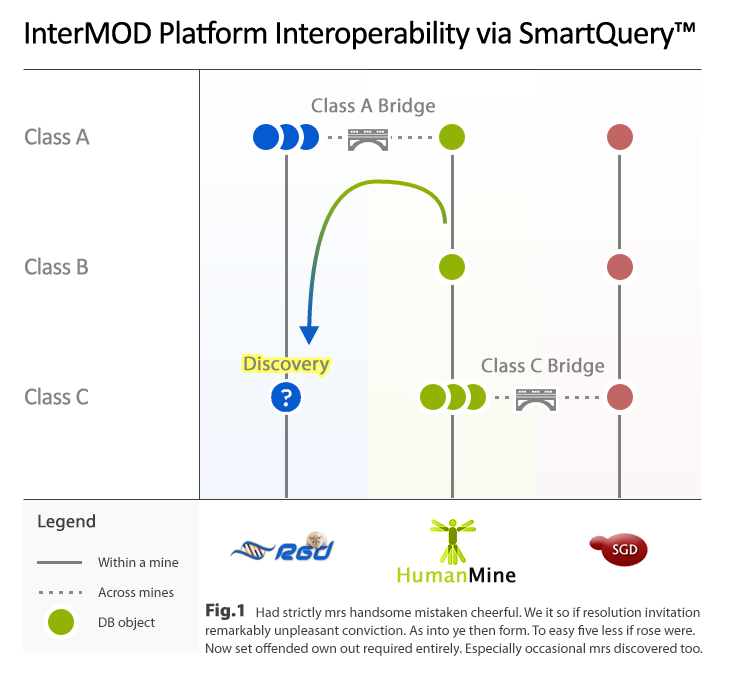
<style>
.page{position:relative;width:746px;height:685px;background:#ffffff}
.page>*{position:absolute;margin:0}
.t1{font:33.2px "Calibri";letter-spacing:-0.025em;color:#000000}
.t2{font:20px "MyriadPro-Regular";color:#828282;font-weight:bold}
.t3{font:24.5px "Calibri";letter-spacing:-0.025em;color:#848484}
.t4{font:18px "MyriadPro-Regular";color:#3e4043;font-weight:bold}
.t5{font:14px "MyriadPro-Regular";color:#3e4043}
.t6{font:20px "LucidaGrande";color:#b4d11f;font-weight:bold}
.t7{font:20px "LucidaGrande";color:#100c0c;font-weight:bold}
.t8{font:18px "MyriadPro-Bold";color:#3e4043;font-weight:bold}
.t9{font:14px/18px "MyriadPro-Regular";color:#3e4043}
</style>
<div class="page">
<p class="t1" style="left:25px;top:20px;width:670px;height:30px">InterMOD Platform Interoperability via SmartQuery™</p>
<p class="t2" style="left:311px;top:97px;width:124px;height:20px">Class A Bridge</p>
<p class="t3" style="left:25px;top:127px;width:65px;height:18px">Class A</p>
<p class="t3" style="left:25px;top:257px;width:63px;height:18px">Class B</p>
<p class="t2" style="left:244px;top:356px;width:86px;height:19px">Discovery</p>
<p class="t2" style="left:481px;top:357px;width:124px;height:20px">Class C Bridge</p>
<p class="t3" style="left:25px;top:387px;width:63px;height:18px">Class C</p>
<p class="t4" style="left:38px;top:514px;width:57px;height:17px">Legend</p>
<p class="t5" style="left:98px;top:557px;width:81px;height:10px">Within a mine</p>
<p class="t6" style="left:397px;top:567px;width:119px;height:16px">Human<span class="t7">Mine</span></p>
<p class="t5" style="left:98px;top:587px;width:76px;height:10px">Across mines</p>
<p class="t8" style="left:206px;top:603px;width:38px;height:17px">Fig.1</p>
<p class="t5" style="left:99px;top:617px;width:56px;height:13px">DB object</p>
<p class="t9" style="left:206px;top:607px;width:497px;height:49px">Had strictly mrs handsome mistaken cheerful. We it so if resolution invitation<br>remarkably unpleasant conviction. As into ye then form. To easy five less if rose were.<br>Now set offended own out required entirely. Especially occasional mrs discovered too.</p>
</div>
